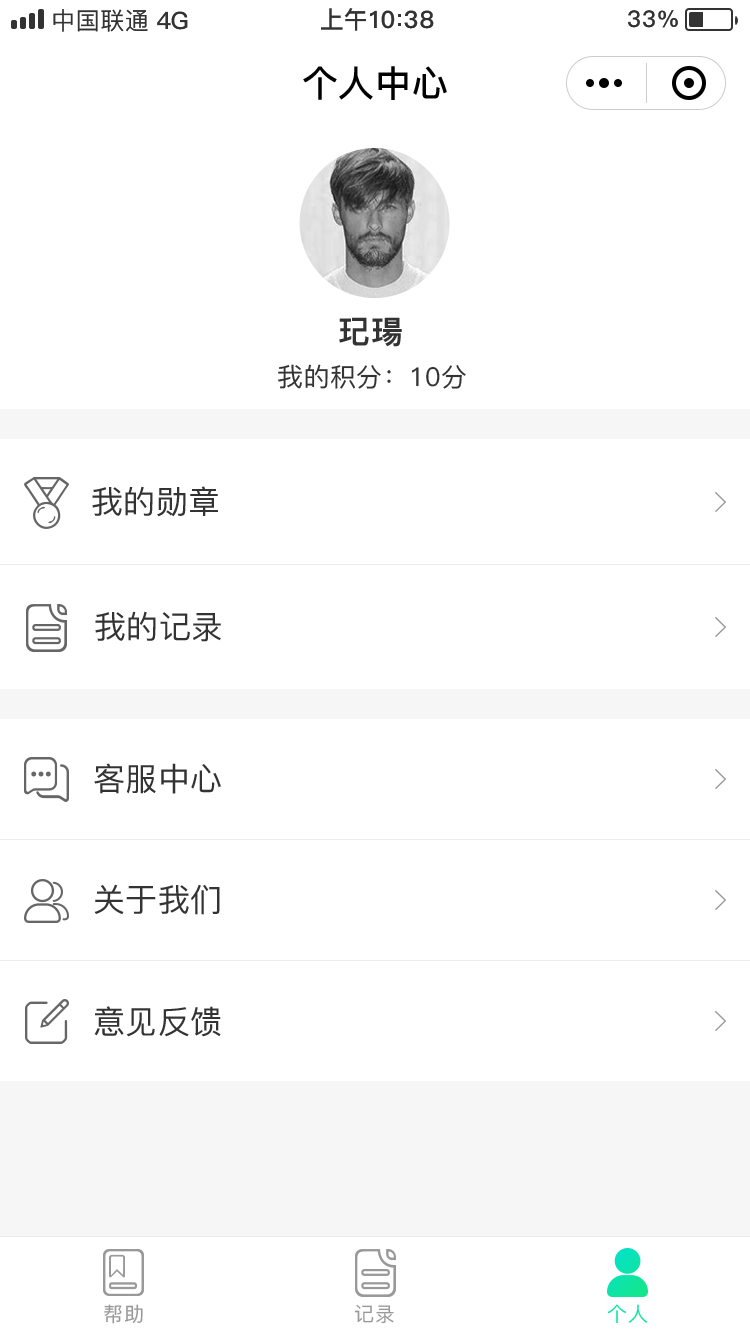
<style>
.page{position:relative;width:750px;height:1334px;background:#ffffff}
.page>*{position:absolute;margin:0}
.t1{font:24px "PingFang-SC-Medium";letter-spacing:0.025em;color:#333333}
.t2{font:24px "PingFang-SC-Bold";color:#333333}
.t3{font:24px "PingFang-SC-Heavy";letter-spacing:-0.05em;color:#333333}
.t4{font:24px "PingFang-SC-Heavy";letter-spacing:0.075em;color:#333333}
.t5{font:24px "PingFang-SC-Heavy";letter-spacing:0.085em;color:#333333}
.t6{font:23px "PingFang-SC-Bold";letter-spacing:0.025em;color:#333333}
.t7{font:23px "PingFang-SC-Bold";letter-spacing:0.05em;color:#333333}
.t8{font:36px "PingFang-SC-Bold";letter-spacing:0.016em;color:#010101}
.t9{font:32px "PingFang-SC-Heavy";letter-spacing:0.016em;color:#333333}
.t10{font:26px "PingFang-SC-Medium";letter-spacing:0.016em;color:#333333}
.t11{font:32px "PingFang-SC-Medium";letter-spacing:0.016em;color:#333333}
.t12{font:20px "PingFang-SC-Medium";letter-spacing:0.05em;color:#999999}
.t13{font:20px "PingFang-SC-Medium";letter-spacing:0.05em;color:#0fe4a0}
</style>
<div class="page">
<p class="t1" style="left:53px;top:9px;width:95px;height:23px">中国联通</p>
<p class="t2" style="left:157px;top:11px;width:31px;height:19px">4G</p>
<p class="t2" style="left:321px;top:8px;width:74px;height:23px">上午<span class="t3">1</span><span class="t4">0</span></p>
<p class="t5" style="left:404px;top:10px;width:30px;height:19px">38</p>
<p class="t6" style="left:628px;top:10px;width:50px;height:18px"><span class="t7">3</span>3%</p>
<p class="t8" style="left:303px;top:66px;width:144px;height:34px">个人中心</p>
<p class="t9" style="left:339px;top:317px;width:63px;height:30px">玘瑒</p>
<p class="t10" style="left:278px;top:364px;width:188px;height:25px">我的积分：10分</p>
<p class="t11" style="left:92px;top:486px;width:126px;height:31px">我的勋章</p>
<p class="t11" style="left:95px;top:611px;width:126px;height:31px">我的记录</p>
<p class="t11" style="left:94px;top:763px;width:127px;height:31px">客服中心</p>
<p class="t11" style="left:94px;top:884px;width:126px;height:31px">关于我们</p>
<p class="t11" style="left:94px;top:1006px;width:127px;height:31px">意见反馈</p>
<p class="t12" style="left:104px;top:1304px;width:39px;height:20px">帮助</p>
<p class="t12" style="left:354px;top:1305px;width:40px;height:19px">记录</p>
<p class="t13" style="left:607px;top:1304px;width:41px;height:19px">个人</p>
</div>
